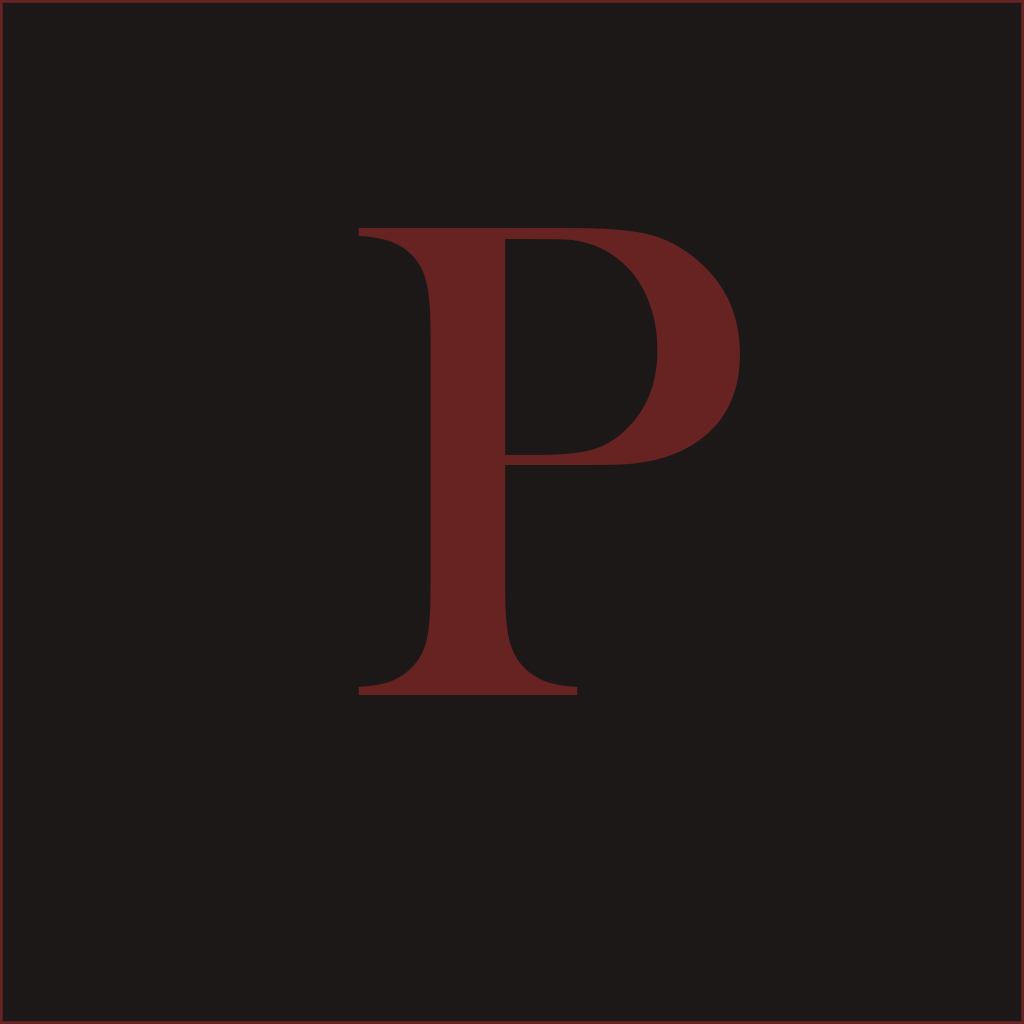
<style>
.page{position:relative;width:1024px;height:1024px;background:#1c1818}
.page>*{position:absolute;margin:0}
.t1{font:700px "BaskOldFace";color:#672222}
</style>
<div class="page">
<p class="t1" style="left:358px;top:227px;width:382px;height:468px">P</p>
</div>
